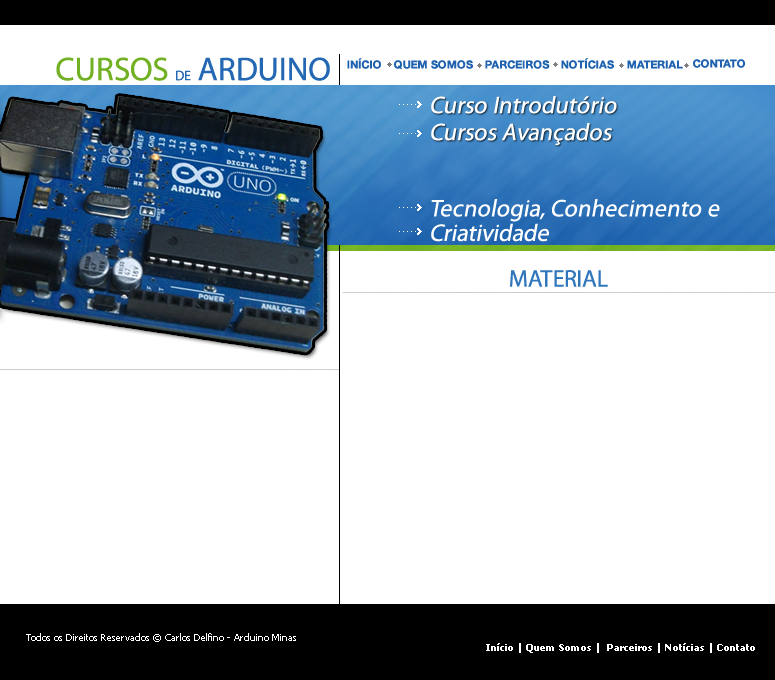
<style>
.page{position:relative;width:775px;height:680px;background:#ffffff}
.page>*{position:absolute;margin:0}
.t1{font:33px "MyriadPro-Regular";color:#2468b3;text-transform:uppercase}
.t2{font:33px "MyriadPro-Regular";color:#72b123;text-transform:uppercase}
.t3{font:14px "MyriadPro-Regular";color:#2468b3;text-transform:uppercase}
.t4{font:11px "HelveticaNeueLTStd-Bd";color:#1f62af;text-transform:uppercase}
.t5{font:24px "MyriadPro-Regular";color:#ffffff;font-style:italic}
.t6{font:24px/24.6px "MyriadPro-Regular";color:#ffffff;font-style:italic}
.t7{font:24px "MyriadPro-Regular";color:#3076bd;text-transform:uppercase}
.t8{font:10px "Tahoma";color:#ffffff}
.t9{font:10px "Tahoma-Bold";color:#ffffff}
</style>
<div class="page">
<p class="t1" style="left:56px;top:57px;width:274px;height:24px"><span class="t2">Cursos </span><span class="t3">de</span> Arduino</p>
<p class="t4" style="left:347px;top:58px;width:34px;height:11px">Início</p>
<p class="t4" style="left:394px;top:60px;width:79px;height:10px">Quem Somos</p>
<p class="t4" style="left:485px;top:60px;width:65px;height:9px">Parceiros</p>
<p class="t4" style="left:561px;top:58px;width:53px;height:11px">Notícias</p>
<p class="t4" style="left:627px;top:60px;width:56px;height:9px">Material</p>
<p class="t4" style="left:693px;top:59px;width:52px;height:9px">Contato</p>
<p class="t5" style="left:431px;top:96px;width:186px;height:18px">Curso Introdutório</p>
<p class="t5" style="left:431px;top:123px;width:181px;height:23px">Cursos Avançados</p>
<p class="t6" style="left:431px;top:199px;width:289px;height:43px">Tecnologia, Conhecimento e<br>Criatividade</p>
<p class="t7" style="left:510px;top:270px;width:98px;height:17px">Material</p>
<p class="t8" style="left:26px;top:633px;width:270px;height:9px">Todos os Direitos Reservados © Carlos Delfino - Arduino Minas</p>
<p class="t9" style="left:486px;top:643px;width:269px;height:10px">Início | Quem Somos |  Parceiros | Notícias | Contato</p>
</div>
